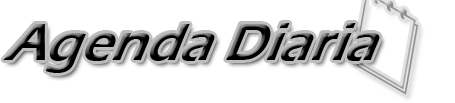
<style>
.page{position:relative;width:455px;height:103px;background:#ffffff}
.page>*{position:absolute;margin:0}
.t1{font:57.7px "ErasITC-Demi";color:#000000;scale:0.94 1}
</style>
<div class="page">
<p class="t1" style="left:3px;top:23px;width:377px;height:50px">Agenda Diaria</p>
</div>
